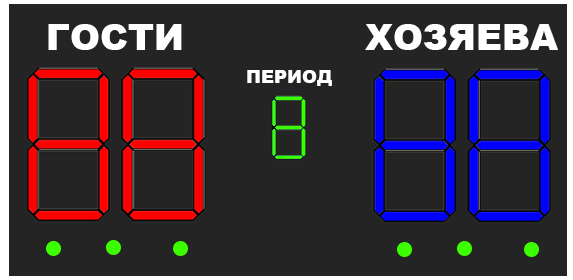
<style>
.page{position:relative;width:573px;height:280px;background:#242424}
.page>*{position:absolute;margin:0}
.t1{font:36px "Arial-Black";color:#ffffff}
.t2{font:36px "Arial-Black";color:#0000ff}
.t3{font:18px "Arial-Black";color:#ffffff}
</style>
<div class="page">
<p class="t1" style="left:48px;top:24px;width:134px;height:26px"><span class="t2"> </span>ГОСТИ</p>
<p class="t1" style="left:365px;top:24px;width:193px;height:26px">ХОЗЯЕВА</p>
<p class="t3" style="left:247px;top:70px;width:85px;height:16px">ПЕРИОД</p>
</div>
